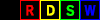
<style>
.page{position:relative;width:100px;height:20px;background:#000000}
.page>*{position:absolute;margin:0}
.t1{font:13.3px "Yj-TEUNTEUN--Bold";color:#ff0000}
.t2{font:13.3px "Yj-TEUNTEUN--Bold";color:#ffff00}
.t3{font:13.3px "Yj-TEUNTEUN--Bold";color:#00ff00}
.t4{font:13.3px "Yj-TEUNTEUN--Bold";color:#0000ff}
</style>
<div class="page">
<p class="t1" style="left:26px;top:5px;width:8px;height:11px">R</p>
<p class="t2" style="left:47px;top:5px;width:8px;height:11px">D</p>
<p class="t3" style="left:66px;top:5px;width:9px;height:11px">S</p>
<p class="t4" style="left:84px;top:5px;width:12px;height:11px">W</p>
</div>
